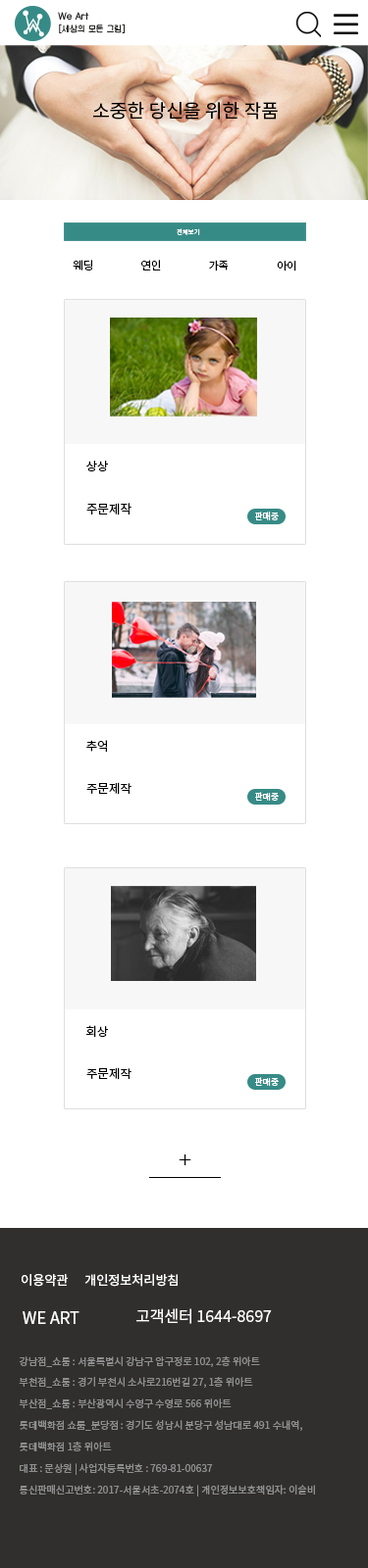
<style>
.page{position:relative;width:368px;height:1568px;background:#ffffff}
.page>*{position:absolute;margin:0}
.t1{font:18.8px "NotoSansKR-Regular";color:#000000}
.t2{font:6.3px "NotoSansKR-Regular";color:#ffffff}
.t3{font:10.9px "NotoSansKR-Regular";color:#000000}
.t4{font:12.2px "NotoSansKR-Regular";color:#000000}
.t5{font:8.6px "NotoSansKR-Regular";color:#ffffff}
.t6{font:12px "NotoSansKR-Regular";color:#000000}
.t7{font:8.5px "NotoSansKR-Regular";color:#ffffff}
.t8{font:20.6px "BellMTBold";color:#000000;scale:1.04 1}
.t9{font:12.9px "NotoSansKR-Regular";color:#fffefe}
.t10{font:16.3px "NotoSansKR-Regular";color:#fffefe}
.t11{font:15.8px "NotoSansKR-Regular";color:#fffefe}
.t12{font:10px/21.4px "NotoSansKR-Regular";color:#8e8e8e}
</style>
<div class="page">
<p class="t1" style="left:93px;top:101px;width:184px;height:19px">소중한 당신을 위한 작품</p>
<p class="t2" style="left:176px;top:228px;width:24px;height:7px">전체보기</p>
<p class="t3" style="left:73px;top:260px;width:19px;height:10px">웨딩</p>
<p class="t3" style="left:141px;top:260px;width:20px;height:10px">연인</p>
<p class="t3" style="left:209px;top:260px;width:19px;height:11px">가족</p>
<p class="t3" style="left:276px;top:261px;width:20px;height:10px">아이</p>
<p class="t4" style="left:86px;top:461px;width:22px;height:10px">상상</p>
<p class="t4" style="left:86px;top:503px;width:45px;height:12px">주문제작</p>
<p class="t5" style="left:255px;top:512px;width:23px;height:8px">판매중</p>
<p class="t6" style="left:86px;top:740px;width:21px;height:13px">추억</p>
<p class="t6" style="left:86px;top:782px;width:45px;height:13px">주문제작</p>
<p class="t7" style="left:255px;top:792px;width:23px;height:9px">판매중</p>
<p class="t6" style="left:86px;top:1025px;width:22px;height:13px">회상</p>
<p class="t6" style="left:86px;top:1067px;width:45px;height:13px">주문제작</p>
<p class="t7" style="left:255px;top:1077px;width:23px;height:9px">판매중</p>
<p class="t8" style="left:178px;top:1154px;width:13px;height:11px">+</p>
<p class="t9" style="left:22px;top:1274px;width:46px;height:13px">이용약관</p>
<p class="t9" style="left:84px;top:1273px;width:93px;height:14px">개인정보처리방침</p>
<p class="t10" style="left:23px;top:1311px;width:56px;height:13px">WE ART</p>
<p class="t11" style="left:136px;top:1308px;width:135px;height:16px">고객센터 1644-8697</p>
<p class="t12" style="left:19px;top:1356px;width:296px;height:140px">강남점_쇼룸 : 서울특별시 강남구 압구정로 102, 2층 위아트  <br>부천점_쇼룸 : 경기 부천시 소사로216번길 27, 1층 위아트<br>부산점_쇼룸 : 부산광역시 수영구 수영로 566 위아트<br>롯데백화점 쇼룸_분당점 : 경기도 성남시 분당구 성남대로 491 수내역, <br>롯데백화점 1층 위아트<br>대표 : 문상원 | 사업자등록번호 : 769-81-00637 <br>통신판매신고번호: 2017-서울서초-2074호 | 개인정보보호책임자: 이슬비</p>
</div>
